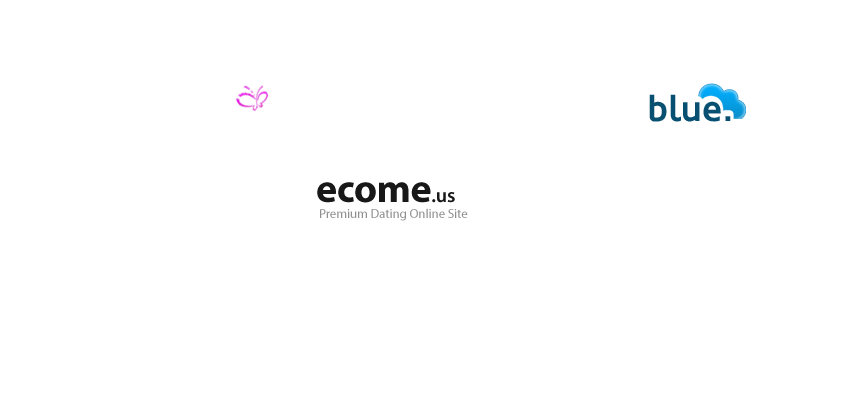
<style>
.page{position:relative;width:850px;height:400px;background:#ffffff}
.page>*{position:absolute;margin:0}
.t1{font:35.9px "Oblik-Bold";color:#085071}
.t2{font:40px "MyriadPro-Bold";letter-spacing:-0.01em;color:#181818}
.t3{font:20px "MyriadPro-Semibold";letter-spacing:-0.01em;color:#181818}
.t4{font:13px "MyriadPro-Regular";letter-spacing:-0.005em;color:#909091}
</style>
<div class="page">
<p class="t1" style="left:649px;top:94px;width:82px;height:28px">blue.</p>
<p class="t2" style="left:317px;top:182px;width:138px;height:21px">ecome<span class="t3">.us</span></p>
<p class="t4" style="left:320px;top:208px;width:148px;height:13px">Premium Dating Online Site</p>
</div>
